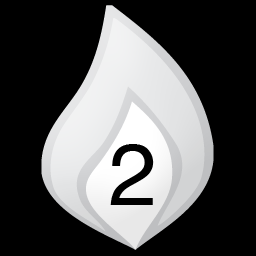
<style>
.page{position:relative;width:256px;height:256px;background:#000000}
.page>*{position:absolute;margin:0}
.t1{font:87.7px "Helvetica";color:#000000}
</style>
<div class="page">
<p class="t1" style="left:110px;top:144px;width:44px;height:61px">2</p>
</div>
